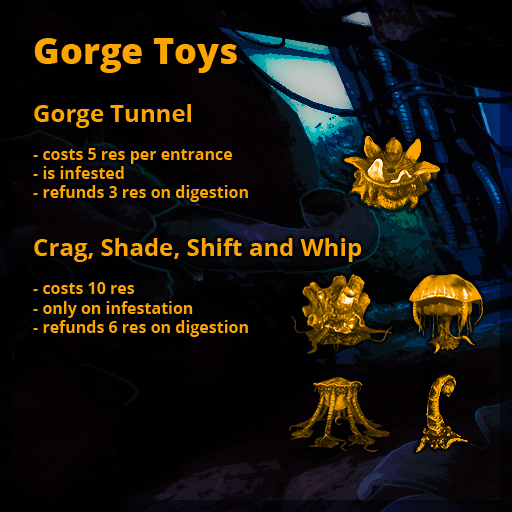
<style>
.page{position:relative;width:512px;height:512px}
.page>*{position:absolute;margin:0}
.t1{font:16px "OpenSans-Bold";color:#fba501}
.t2{font:36px "OpenSans-Extrabold";color:#fba501}
.t3{font:24px "OpenSans-Extrabold";color:#fba501}
.t4{font:24px "OpenSans-Bold";color:#fba501}
</style>
<div class="page">
<p class="t1" style="left:33px;top:38px;width:329px;height:299px"><span class="t2">Gorge Toys<br></span><span class="t3"><br></span><span class="t4">Gorge Tunnel</span><br><br>- costs 5 res per entrance<br>- is infested<br>- refunds 3 res on digestion<span class="t4"><br><br>Crag, Shade, Shift and Whip</span><br><br>- costs 10 res<br>- only on infestation<br>- refunds 6 res on digestion</p>
</div>
